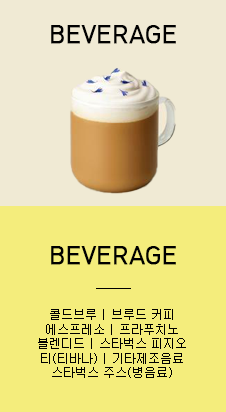
<style>
.page{position:relative;width:226px;height:412px;background:#f4ed7c}
.page>*{position:absolute;margin:0}
.t1{font:24px "HCRDotum";color:#000000;font-weight:bold}
.t2{font:12px "New-Gulim";color:#000000}
.t3{font:12px/120px "New-Gulim";color:#000000}
</style>
<div class="page">
<p class="t1" style="left:51px;top:25px;width:125px;height:19px">BEVERAGE</p>
<p class="t1" style="left:51px;top:246px;width:125px;height:19px">BEVERAGE</p>
<p class="t2" style="left:38px;top:309px;width:148px;height:69px;text-align:center"><span class="t3">콜드브루 | 브루드 커피<br></span>에스프레소 | 프라푸치노<br>블렌디드 | 스타벅스 피지오<br>티(티바나) | 기타제조음료<br>스타벅스 주스(병음료)</p>
</div>
